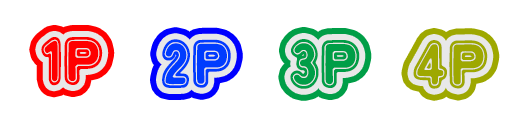
<style>
.page{position:relative;width:512px;height:128px;background:#ffffff}
.page>*{position:absolute;margin:0}
.t1{font:66.7px "DokiDokiFantasia";color:#ff0000}
.t2{font:66.7px "DokiDokiFantasia";color:#003cff}
.t3{font:66.7px "DokiDokiFantasia";color:#009e47}
.t4{font:66.7px "DokiDokiFantasia";color:#9ea801}
</style>
<div class="page">
<p class="t1" style="left:41px;top:37px;width:62px;height:49px">1P</p>
<p class="t2" style="left:162px;top:39px;width:69px;height:49px">2P</p>
<p class="t3" style="left:290px;top:39px;width:70px;height:50px">3P</p>
<p class="t4" style="left:413px;top:40px;width:75px;height:49px">4P</p>
</div>
